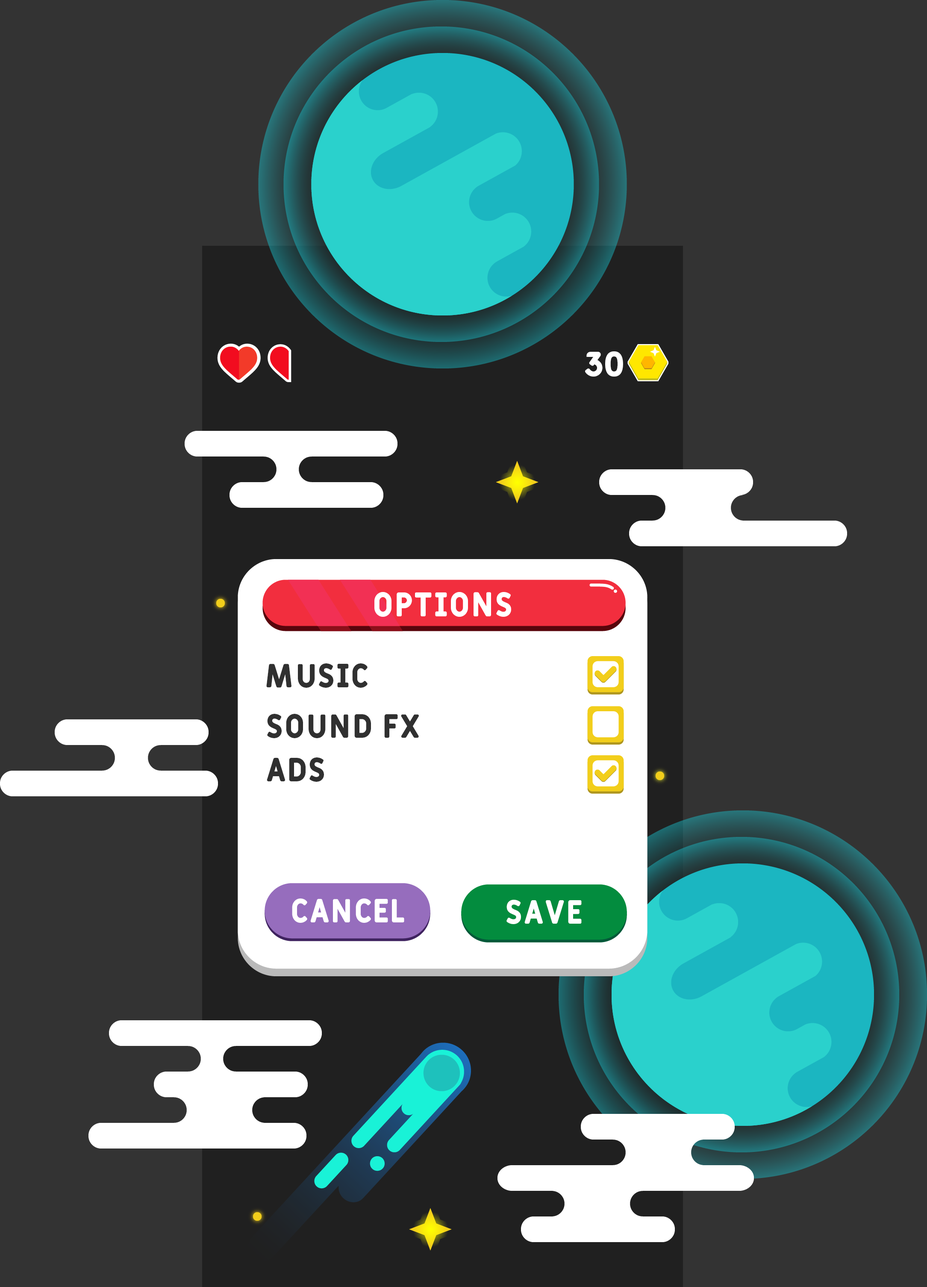
<style>
.page{position:relative;width:927px;height:1287px;background:#333333}
.page>*{position:absolute;margin:0}
.t1{font:34.2px "Fulbo-Argenta";color:#ffffff}
.t2{font:33.1px "Fulbo-Argenta";color:#303030}
.t3{font:33.1px "Fulbo-Argenta";color:#ffffff}
</style>
<div class="page">
<p class="t1" style="left:585px;top:351px;width:38px;height:25px">30</p>
<p class="t1" style="left:374px;top:592px;width:137px;height:25px">Options</p>
<p class="t2" style="left:266px;top:663px;width:101px;height:25px">Music</p>
<p class="t2" style="left:267px;top:714px;width:152px;height:24px">Sound FX</p>
<p class="t2" style="left:267px;top:757px;width:57px;height:25px">Ads</p>
<p class="t3" style="left:292px;top:898px;width:112px;height:25px">Cancel</p>
<p class="t3" style="left:506px;top:899px;width:76px;height:25px">Save</p>
</div>
